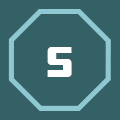
<style>
.page{position:relative;width:120px;height:120px;background:#336166}
.page>*{position:absolute;margin:0}
.t1{font:48px "TransformersMovie";color:#ffffff}
</style>
<div class="page">
<p class="t1" style="left:47px;top:47px;width:25px;height:30px">5</p>
</div>
